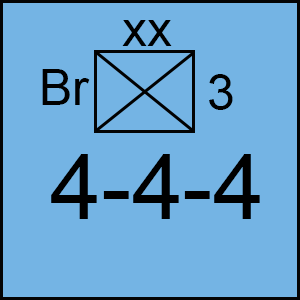
<style>
.page{position:relative;width:300px;height:300px;background:#74b4e4}
.page>*{position:absolute;margin:0}
.t1{font:50px "ArialMT";color:#000000}
.t2{font:91.7px "ArialMT";color:#000000}
</style>
<div class="page">
<p class="t1" style="left:122px;top:20px;width:50px;height:26px">xx</p>
<p class="t1" style="left:42px;top:69px;width:48px;height:36px">Br</p>
<p class="t1" style="left:209px;top:74px;width:24px;height:36px">3</p>
<p class="t2" style="left:51px;top:154px;width:209px;height:65px">4-4-4</p>
</div>
